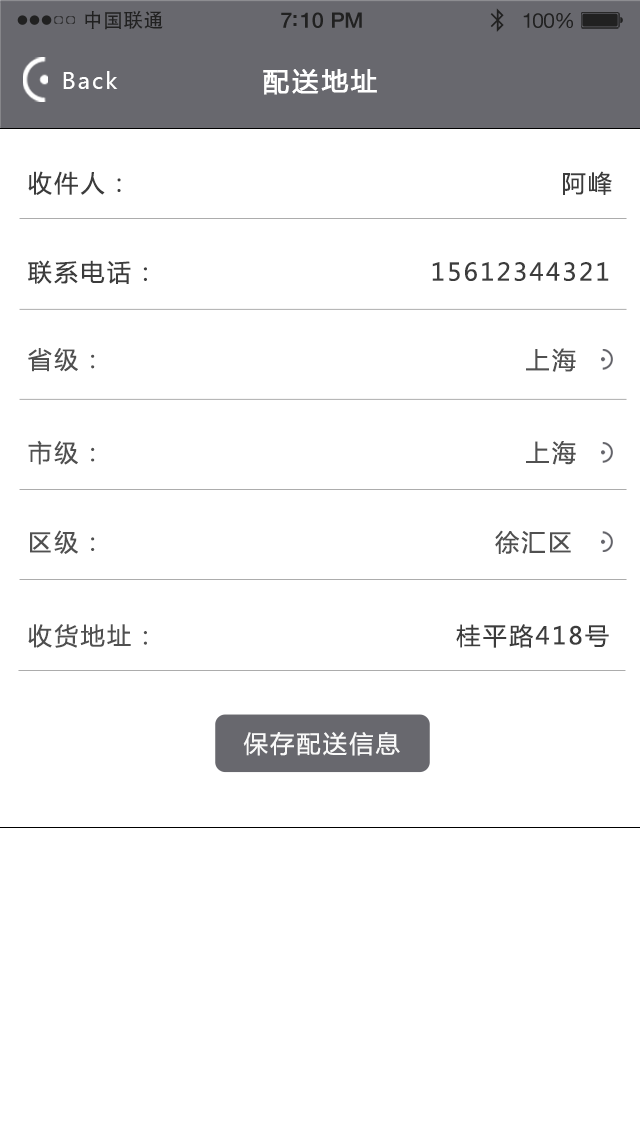
<style>
.page{position:relative;width:640px;height:1136px;background:#ffffff}
.page>*{position:absolute;margin:0}
.t1{font:19.7px "AdobeHeitiStd-Regular";letter-spacing:0.02em;color:#212121}
.t2{font:21.4px "HelveticaNeue-Medium";letter-spacing:-0.02em;color:#212121}
.t3{font:20.6px "HelveticaNeue";letter-spacing:-0.02em;color:#212121}
.t4{font:22px "MicrosoftYaHei";letter-spacing:0.1em;color:#ffffff}
.t5{font:26px "MicrosoftYaHei";letter-spacing:0.1em;color:#ffffff;font-weight:bold}
.t6{font:24px "MicrosoftYaHei";letter-spacing:0.1em;color:#3c3c3c}
.t7{font:24px "MicrosoftYaHei";letter-spacing:0.1em;color:#505050}
.t8{font:24px "MicrosoftYaHei";letter-spacing:0.1em;color:#f9f9f9}
</style>
<div class="page">
<p class="t1" style="left:85px;top:10px;width:78px;height:20px">中国联通</p>
<p class="t2" style="left:281px;top:12px;width:81px;height:16px">7:10 PM</p>
<p class="t3" style="left:523px;top:13px;width:50px;height:16px">100%</p>
<p class="t4" style="left:63px;top:71px;width:55px;height:18px">Back</p>
<p class="t5" style="left:263px;top:69px;width:114px;height:26px">配送地址</p>
<p class="t6" style="left:28px;top:171px;width:93px;height:24px">收件人：</p>
<p class="t6" style="left:563px;top:171px;width:49px;height:24px">阿峰</p>
<p class="t6" style="left:28px;top:260px;width:119px;height:24px">联系电话：</p>
<p class="t6" style="left:432px;top:262px;width:177px;height:19px">15612344321</p>
<p class="t7" style="left:28px;top:348px;width:67px;height:24px">省级：</p>
<p class="t7" style="left:526px;top:348px;width:50px;height:24px">上海</p>
<p class="t7" style="left:28px;top:440px;width:67px;height:25px">市级：</p>
<p class="t7" style="left:526px;top:441px;width:50px;height:24px">上海</p>
<p class="t7" style="left:30px;top:530px;width:65px;height:24px">区级：</p>
<p class="t7" style="left:495px;top:530px;width:76px;height:24px">徐汇区</p>
<p class="t7" style="left:28px;top:624px;width:119px;height:24px">收货地址：</p>
<p class="t6" style="left:456px;top:624px;width:153px;height:24px">桂平路418号</p>
<p class="t8" style="left:243px;top:732px;width:157px;height:24px">保存配送信息</p>
</div>
